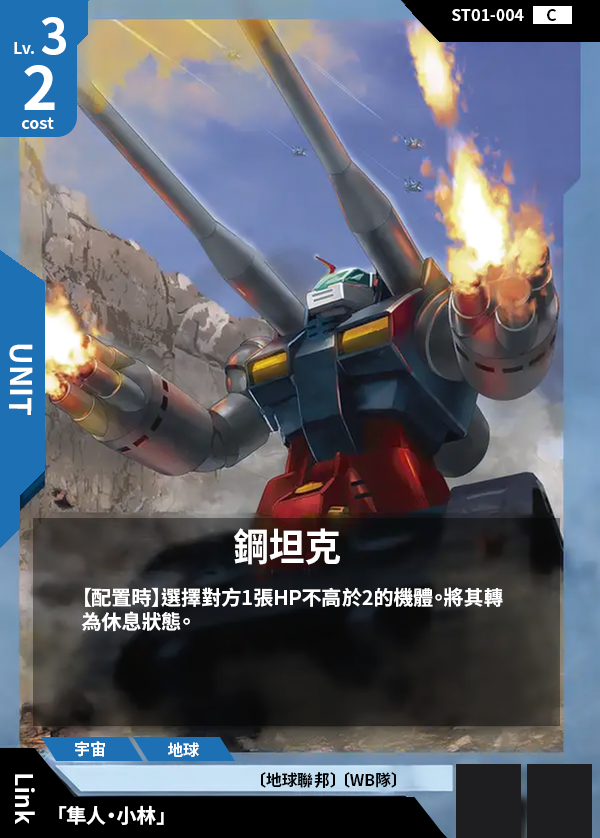
<style>
.page{position:relative;width:600px;height:838px}
.page>*{position:absolute;margin:0}
.t1{font:48px "NotoSansCJKtc-Bold";color:#ffffff}
.t2{font:16px "NotoSansCJKtc-Bold";color:#ffffff}
.t3{font:16px "NotoSansCJKtc-Bold";color:#000000}
.t4{font:60px "NotoSansCJKtc-Bold";color:#ffffff}
.t5{font:30px "NotoSansCJKtc-Bold";color:#ffffff}
.t6{font:38.4px "NotoSansCJKtc-Bold";color:#ffffff;scale:0.94 1}
.t7{font:20px "NotoSansCJKtc-Bold";color:#ffffff}
.t8{font:24px "NotoSansCJKtc-Bold";color:#ffffff}
</style>
<div class="page">
<p class="t1" style="left:41px;top:17px;width:25px;height:38px">3</p>
<p class="t2" style="left:452px;top:9px;width:72px;height:12px">ST01-004</p>
<p class="t3" style="left:547px;top:9px;width:10px;height:12px">C</p>
<p class="t2" style="left:14px;top:42px;width:20px;height:12px">Lv.</p>
<p class="t4" style="left:24px;top:65px;width:31px;height:45px">2</p>
<p class="t2" style="left:22px;top:117px;width:32px;height:12px">cost</p>
<p class="t5" style="left:9px;top:344px;width:24px;height:71px;rotate:90deg">UNIT</p>
<p class="t6" style="left:234px;top:528px;width:106px;height:37px">鋼坦克</p>
<p class="t7" style="left:81px;top:587px;width:422px;height:45px">【配置時】選擇對方1張HP不高於2的機體。將其轉<br>為休息狀態。</p>
<p class="t2" style="left:75px;top:741px;width:30px;height:16px">宇宙</p>
<p class="t2" style="left:168px;top:742px;width:31px;height:15px">地球</p>
<p class="t8" style="left:15px;top:774px;width:20px;height:50px;rotate:90deg">Link</p>
<p class="t3" style="left:261px;top:772px;width:135px;height:16px">〔地球聯邦〕 〔WB隊〕</p>
<p class="t7" style="left:59px;top:805px;width:105px;height:20px">「隼人・小林」</p>
</div>
